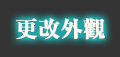
<style>
.page{position:relative;width:120px;height:57px;background:#333333}
.page>*{position:absolute;margin:0}
.t1{font:22px "RyuminPr6N-ExBold";color:#fff6f2;font-weight:bold}
</style>
<div class="page">
<p class="t1" style="left:16px;top:18px;width:89px;height:22px">更改外觀</p>
</div>
